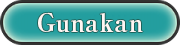
<style>
.page{position:relative;width:180px;height:45px}
.page>*{position:absolute;margin:0}
.t1{font:25px "RyuminPro-ExBold";color:#fff6f3}
</style>
<div class="page">
<p class="t1" style="left:38px;top:12px;width:105px;height:20px">Gunakan</p>
</div>
